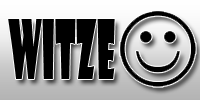
<style>
.page{position:relative;width:200px;height:100px;background:#000000}
.page>*{position:absolute;margin:0}
.t1{font:80.3px "ShowcardGothic-Reg";color:#000000;scale:0.41 1}
</style>
<div class="page">
<p class="t1" style="left:8px;top:19px;width:107px;height:60px">Witze</p>
</div>
